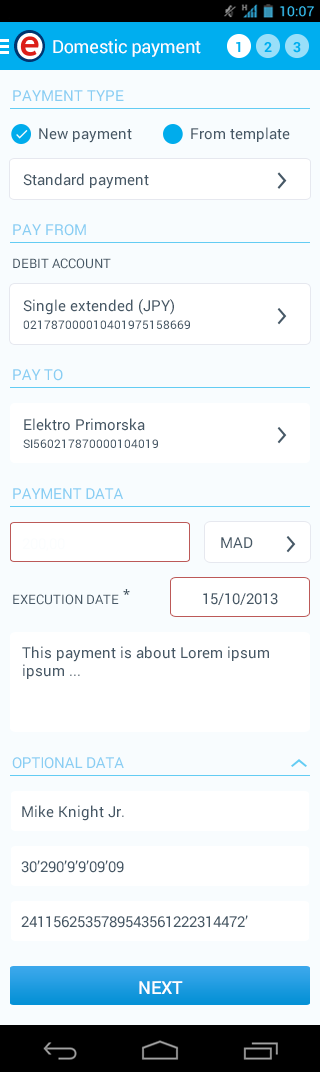
<style>
.page{position:relative;width:320px;height:1072px;background:#f8fcfe}
.page>*{position:absolute;margin:0}
.t1{font:18px "Roboto-Regular";letter-spacing:-0.015em;color:#ffffff}
.t2{font:15px "Roboto-Regular";color:#89cef3}
.t3{font:15px "Roboto-Regular";color:#465866}
.t4{font:13px "Roboto-Regular";color:#465866}
.t5{font:12px/18px "Roboto-Regular";color:#465866}
.t6{font:15px/18px "Roboto-Regular";color:#465866}
.t7{font:15px "Roboto-Regular";letter-spacing:-0.015em;color:#89cef3}
.t8{font:12px/14.4px "Roboto-Regular";color:#465866}
.t9{font:13px "OpenSans-Semibold";letter-spacing:-0.02em;color:#465866}
.t10{font:18px "Roboto-Medium";color:#ffffff}
</style>
<div class="page">
<p class="t1" style="left:53px;top:39px;width:148px;height:18px">Domestic payment</p>
<p class="t2" style="left:13px;top:90px;width:111px;height:11px">PAYMENT TYPE</p>
<p class="t3" style="left:39px;top:128px;width:93px;height:15px">New payment</p>
<p class="t3" style="left:191px;top:127px;width:99px;height:15px">From template</p>
<p class="t3" style="left:23px;top:173px;width:126px;height:16px">Standard payment</p>
<p class="t2" style="left:13px;top:224px;width:73px;height:12px">PAY FROM</p>
<p class="t4" style="left:13px;top:258px;width:98px;height:11px">DEBIT ACCOUNT</p>
<p class="t5" style="left:23px;top:299px;width:167px;height:30px"><span class="t6">Single extended (JPY)<br></span>021787000010401975158669</p>
<p class="t7" style="left:13px;top:369px;width:50px;height:12px">PAY TO</p>
<p class="t6" style="left:23px;top:418px;width:135px;height:30px">Elektro Primorska<br><span class="t8">SI56</span><span class="t5">0217870000104019</span></p>
<p class="t7" style="left:13px;top:488px;width:110px;height:11px">PAYMENT DATA</p>
<p class="t3" style="left:221px;top:537px;width:32px;height:11px">MAD</p>
<p class="t9" style="left:123px;top:589px;width:7px;height:6px">*</p>
<p class="t3" style="left:203px;top:593px;width:75px;height:12px">15/10/2013</p>
<p class="t4" style="left:13px;top:594px;width:106px;height:11px">EXECUTION DATE</p>
<p class="t6" style="left:22px;top:646px;width:247px;height:33px">This payment is about Lorem ipsum ipsum ...</p>
<p class="t7" style="left:12px;top:757px;width:112px;height:12px">OPTIONAL DATA</p>
<p class="t3" style="left:22px;top:805px;width:102px;height:16px">Mike Knight Jr.</p>
<p class="t3" style="left:21px;top:860px;width:103px;height:13px">30’290’9’9’09’09</p>
<p class="t3" style="left:21px;top:915px;width:227px;height:13px">2411562535789543561222314472’</p>
<p class="t10" style="left:139px;top:981px;width:44px;height:13px">NEXT</p>
</div>
